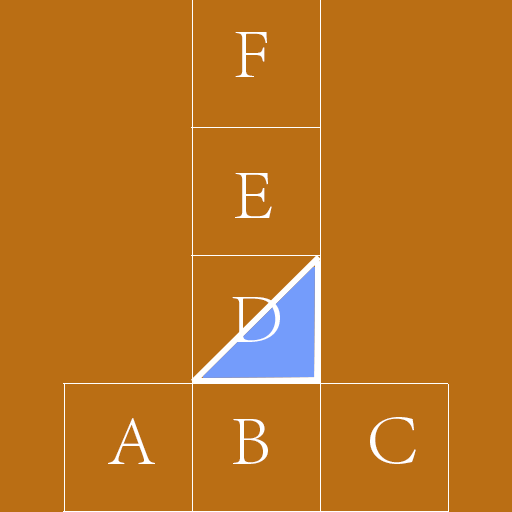
<style>
.page{position:relative;width:512px;height:512px;background:#ba6e14}
.page>*{position:absolute;margin:0}
.t1{font:72px "AdobeSongStd-Light";color:#ffffff}
</style>
<div class="page">
<p class="t1" style="left:235px;top:32px;width:32px;height:45px">F</p>
<p class="t1" style="left:235px;top:173px;width:37px;height:45px">E</p>
<p class="t1" style="left:232px;top:297px;width:48px;height:45px">D</p>
<p class="t1" style="left:108px;top:418px;width:47px;height:46px">A</p>
<p class="t1" style="left:233px;top:419px;width:35px;height:45px">B</p>
<p class="t1" style="left:370px;top:417px;width:46px;height:47px">C</p>
</div>
